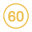
<style>
.page{position:relative;width:32px;height:32px;background:#ffffff}
.page>*{position:absolute;margin:0}
.t1{font:14px "HelveticaNeue";color:#edc051;font-weight:bold}
</style>
<div class="page">
<p class="t1" style="left:8px;top:11px;width:16px;height:11px">60</p>
</div>
